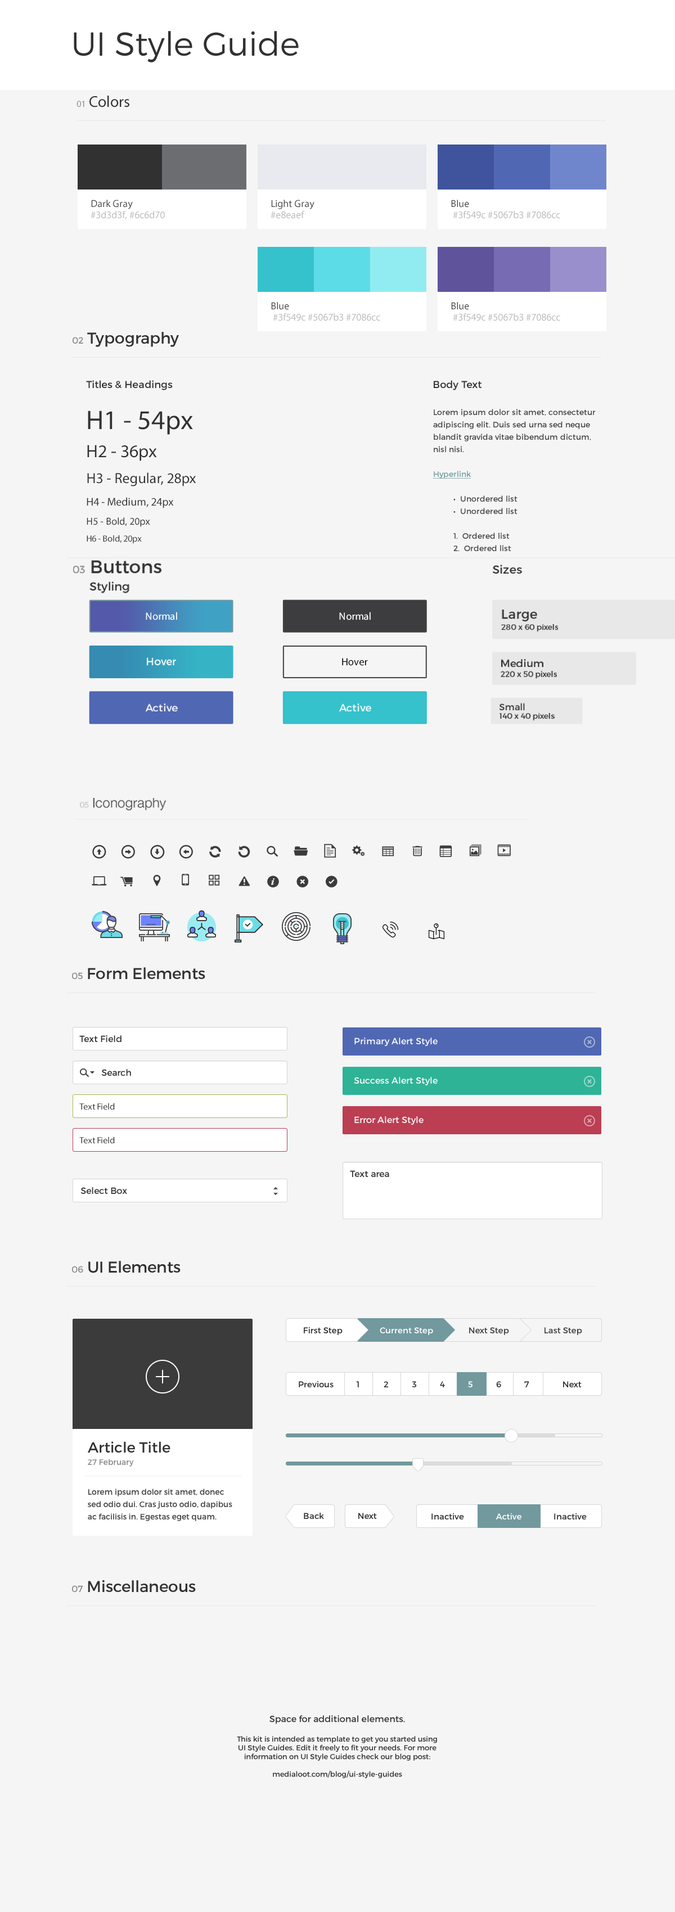
<style>
.page{position:relative;width:675px;height:1912px;background:#f5f5f5}
.page>*{position:absolute;margin:0}
.t1{font:33.2px "Montserrat-Light";color:#313131}
.t2{font:15.8px "MyriadPro-Regular";color:#313131}
.t3{font:9px "MyriadPro-Regular";color:#888888}
.t4{font:10.1px/11.2px "MyriadPro-Regular";color:#bbbbbb}
.t5{font:10.1px "MyriadPro-Regular";color:#444444}
.t6{font:15.8px "Montserrat-Regular";color:#313131}
.t7{font:9px "Montserrat-Regular";color:#888888}
.t8{font:10.1px "Montserrat-Regular";color:#313131}
.t9{font:14.6px/25.9px "MyriadPro-Regular";color:#313131}
.t10{font:27px/28.1px "MyriadPro-Regular";color:#313131}
.t11{font:18px/28.1px "MyriadPro-Regular";color:#313131}
.t12{font:11.2px/22.5px "MyriadPro-Regular";color:#313131}
.t13{font:10.1px/19.1px "MyriadPro-Regular";color:#313131}
.t14{font:9px/16.9px "MyriadPro-Regular";color:#313131}
.t15{font:7.9px/12.4px "Montserrat-Regular";color:#414042}
.t16{font:7.9px/12.4px "Montserrat-Regular";color:#71999e;text-decoration:underline}
.t17{font:18.3px "Montserrat-Regular";color:#313131}
.t18{font:10.5px "Montserrat-Regular";color:#888888}
.t19{font:11.8px "Montserrat-Regular";color:#313131}
.t20{font:10.5px "MyriadPro-Regular";color:#ffffff}
.t21{font:13.1px "Montserrat-Regular";color:#313131}
.t22{font:7.8px "Montserrat-Regular";color:#313131}
.t23{font:10.5px "Montserrat-Regular";color:#ffffff}
.t24{font:10.5px "MyriadPro-Regular";color:#000000}
.t25{font:10.5px "Montserrat-Regular";color:#313131}
.t26{font:9.2px "Montserrat-Regular";color:#313131}
.t27{font:13.5px "HelveticaNeue-Light";color:#444444}
.t28{font:7.7px "HelveticaNeue-Light";color:#aaaaaa}
.t29{font:9px "Montserrat-Regular";color:#313131}
.t30{font:9px "Montserrat-Regular";color:#ffffff}
.t31{font:9px "MyriadPro-Regular";color:#313131}
.t32{font:8.4px "Montserrat-Regular";color:#313131}
.t33{font:8.4px "Montserrat-Regular";color:#ffffff}
.t34{font:8.4px "Montserrat-Regular";color:#414042}
.t35{font:14.6px/12.4px "Montserrat-Regular";color:#313131}
.t36{font:7.9px/12.4px "Montserrat-Regular";color:#888888}
.t37{font:7.3px "Montserrat-Regular";color:#313131}
</style>
<div class="page">
<p class="t1" style="left:74px;top:31px;width:225px;height:31px">UI Style Guide</p>
<p class="t2" style="left:76px;top:96px;width:53px;height:11px"><span class="t3">01 </span>Colors</p>
<p class="t4" style="left:91px;top:200px;width:74px;height:20px"><span class="t5">Dark Gray<br></span>#3d3d3f, #6c6d70</p>
<p class="t5" style="left:271px;top:200px;width:43px;height:19px">Light Gray<br><span class="t4">#e8eaef</span></p>
<p class="t4" style="left:451px;top:200px;width:109px;height:19px"><span class="t5">Blue<br></span> #3f549c #5067b3 #7086cc</p>
<p class="t4" style="left:271px;top:302px;width:109px;height:19px"><span class="t5">Blue<br></span> #3f549c #5067b3 #7086cc</p>
<p class="t4" style="left:451px;top:302px;width:109px;height:19px"><span class="t5">Blue<br></span> #3f549c #5067b3 #7086cc</p>
<p class="t6" style="left:73px;top:332px;width:106px;height:15px"><span class="t7">02 </span>Typography</p>
<p class="t8" style="left:86px;top:380px;width:87px;height:10px">Titles &amp; Headings</p>
<p class="t8" style="left:434px;top:380px;width:48px;height:10px">Body Text</p>
<p class="t9" style="left:87px;top:411px;width:109px;height:133px"><span class="t10">H1 - 54px<br></span><span class="t11">H2 - 36px<br></span>H3 - Regular, 28px<br><span class="t12">H4 - Medium, 24px<br></span><span class="t13">H5 - Bold, 20px<br></span><span class="t14">H6 - Bold, 20px</span></p>
<p class="t15" style="left:433px;top:409px;width:163px;height:143px">Lorem ipsum dolor sit amet, consectetur adipiscing elit. Duis sed urna sed neque blandit gravida vitae bibendum dictum, nisl nisi.<br><br><span class="t16">Hyperlink <br><br></span> •  Unordered list<br> •  Unordered list<br><br> 1.  Ordered list<br> 2.  Ordered list</p>
<p class="t17" style="left:73px;top:560px;width:89px;height:14px"><span class="t18">03 </span>Buttons</p>
<p class="t19" style="left:492px;top:565px;width:31px;height:9px">Sizes</p>
<p class="t19" style="left:89px;top:582px;width:40px;height:11px">Styling</p>
<p class="t20" style="left:146px;top:612px;width:31px;height:8px">Normal</p>
<p class="t20" style="left:339px;top:612px;width:32px;height:8px">Normal</p>
<p class="t21" style="left:502px;top:610px;width:35px;height:12px">Large</p>
<p class="t22" style="left:501px;top:624px;width:57px;height:8px">280 x 60 pixels</p>
<p class="t23" style="left:147px;top:658px;width:29px;height:7px">Hover</p>
<p class="t24" style="left:342px;top:658px;width:26px;height:8px">Hover</p>
<p class="t25" style="left:501px;top:659px;width:42px;height:8px">Medium</p>
<p class="t22" style="left:501px;top:671px;width:56px;height:8px">220 x 50 pixels</p>
<p class="t23" style="left:146px;top:704px;width:32px;height:8px">Active</p>
<p class="t23" style="left:339px;top:704px;width:32px;height:8px">Active</p>
<p class="t22" style="left:500px;top:713px;width:55px;height:8px">140 x 40 pixels</p>
<p class="t26" style="left:500px;top:703px;width:25px;height:7px">Small</p>
<p class="t27" style="left:80px;top:798px;width:86px;height:13px"><span class="t28">05</span> Iconography</p>
<p class="t6" style="left:72px;top:968px;width:133px;height:12px"><span class="t7">05 </span>Form Elements</p>
<p class="t29" style="left:79px;top:1036px;width:43px;height:6px">Text Field</p>
<p class="t30" style="left:354px;top:1038px;width:84px;height:8px">Primary Alert Style</p>
<p class="t29" style="left:101px;top:1069px;width:30px;height:7px">Search</p>
<p class="t30" style="left:354px;top:1077px;width:84px;height:9px">Success Alert Style</p>
<p class="t31" style="left:79px;top:1103px;width:36px;height:7px">Text Field</p>
<p class="t30" style="left:354px;top:1117px;width:70px;height:8px">Error Alert Style</p>
<p class="t31" style="left:79px;top:1137px;width:36px;height:7px">Text Field</p>
<p class="t29" style="left:350px;top:1171px;width:39px;height:6px">Text area</p>
<p class="t29" style="left:80px;top:1187px;width:47px;height:7px">Select Box</p>
<p class="t6" style="left:72px;top:1261px;width:109px;height:13px"><span class="t7">06 </span>UI Elements</p>
<p class="t32" style="left:304px;top:1327px;width:39px;height:8px">First Step</p>
<p class="t33" style="left:380px;top:1328px;width:53px;height:7px">Current Step</p>
<p class="t34" style="left:469px;top:1328px;width:40px;height:7px">Next Step</p>
<p class="t34" style="left:544px;top:1328px;width:38px;height:7px">Last Step</p>
<p class="t32" style="left:299px;top:1381px;width:35px;height:7px">Previous</p>
<p class="t32" style="left:356px;top:1382px;width:3px;height:6px">1</p>
<p class="t32" style="left:384px;top:1382px;width:5px;height:6px">2</p>
<p class="t32" style="left:412px;top:1382px;width:5px;height:6px">3</p>
<p class="t32" style="left:440px;top:1382px;width:5px;height:6px">4</p>
<p class="t33" style="left:468px;top:1382px;width:4px;height:6px">5</p>
<p class="t32" style="left:496px;top:1382px;width:5px;height:6px">6</p>
<p class="t32" style="left:524px;top:1382px;width:5px;height:6px">7</p>
<p class="t32" style="left:563px;top:1382px;width:19px;height:6px">Next</p>
<p class="t35" style="left:88px;top:1442px;width:82px;height:25px">Article Title<br><span class="t36">27 February</span></p>
<p class="t15" style="left:88px;top:1489px;width:144px;height:33px">Lorem ipsum dolor sit amet, donec sed odio dui. Cras justo odio, dapibus ac facilisis in. Egestas eget quam.</p>
<p class="t32" style="left:304px;top:1513px;width:20px;height:6px">Back</p>
<p class="t32" style="left:358px;top:1513px;width:19px;height:6px">Next</p>
<p class="t32" style="left:431px;top:1513px;width:33px;height:7px">Inactive</p>
<p class="t33" style="left:496px;top:1513px;width:25px;height:7px">Active</p>
<p class="t32" style="left:554px;top:1513px;width:33px;height:7px">Inactive</p>
<p class="t6" style="left:72px;top:1580px;width:124px;height:13px"><span class="t7">07 </span>Miscellaneous</p>
<p class="t37" style="left:237px;top:1716px;width:200px;height:63px;text-align:center"><span class="t29">Space for additional elements.<br><br></span>This kit is intended as template to get you started using UI Style Guides. Edit it freely to fit your needs. For more information on UI Style Guides check our blog post:<br><br>medialoot.com/blog/ui-style-guides</p>
</div>
